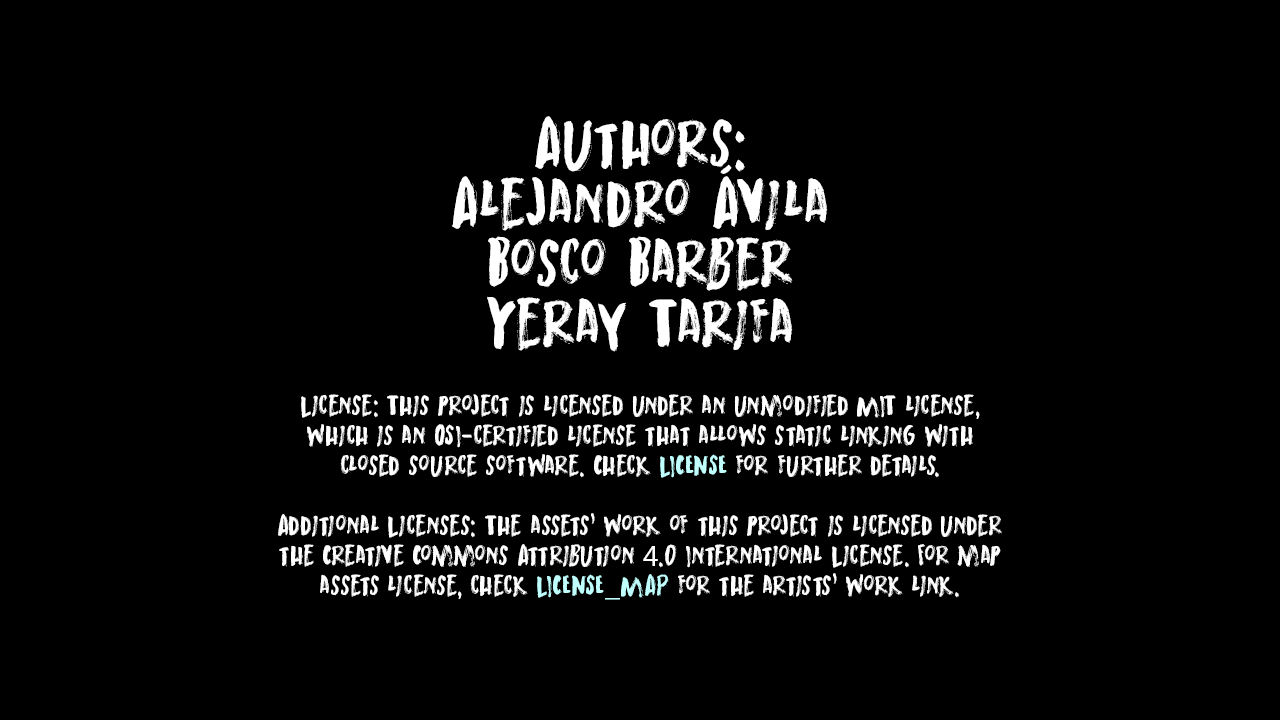
<style>
.page{position:relative;width:1280px;height:720px;background:#000000}
.page>*{position:absolute;margin:0}
.t1{font:72px/60px "MortalCoilDEMO-Regular";color:#ffffff}
.t2{font:30px/30px "MortalCoilDEMO-Regular";color:#ffffff}
.t3{font:30px/30px "MortalCoilDEMO-Regular";color:#bffffd}
.t4{font:30px/30px "MyriadPro-Regular";color:#ffffff}
.t5{font:30px/30px "MyriadPro-Regular";color:#bffffd}
</style>
<div class="page">
<p class="t1" style="left:452px;top:116px;width:376px;height:236px;text-align:center">Authors:<br>Alejandro Ávila<br>Bosco Barber<br>Yeray Tarifa</p>
<p class="t2" style="left:278px;top:394px;width:724px;height:206px;text-align:center">License: This project is licensed under an unmodified MIT license,<br>which is an OSI-certified license that allows static linking with<br>closed source software. Check <span class="t3">LICENSE</span> for further details.<br><br>Additional Licenses: The assets' work of this project is licensed under<br>the Creative Commons Attribution <span class="t4">4</span>.0 International License. For map<br>assets license, check <span class="t3">LICENSE</span><span class="t5">_</span><span class="t3">MAP</span> for the artists' work link.</p>
</div>
